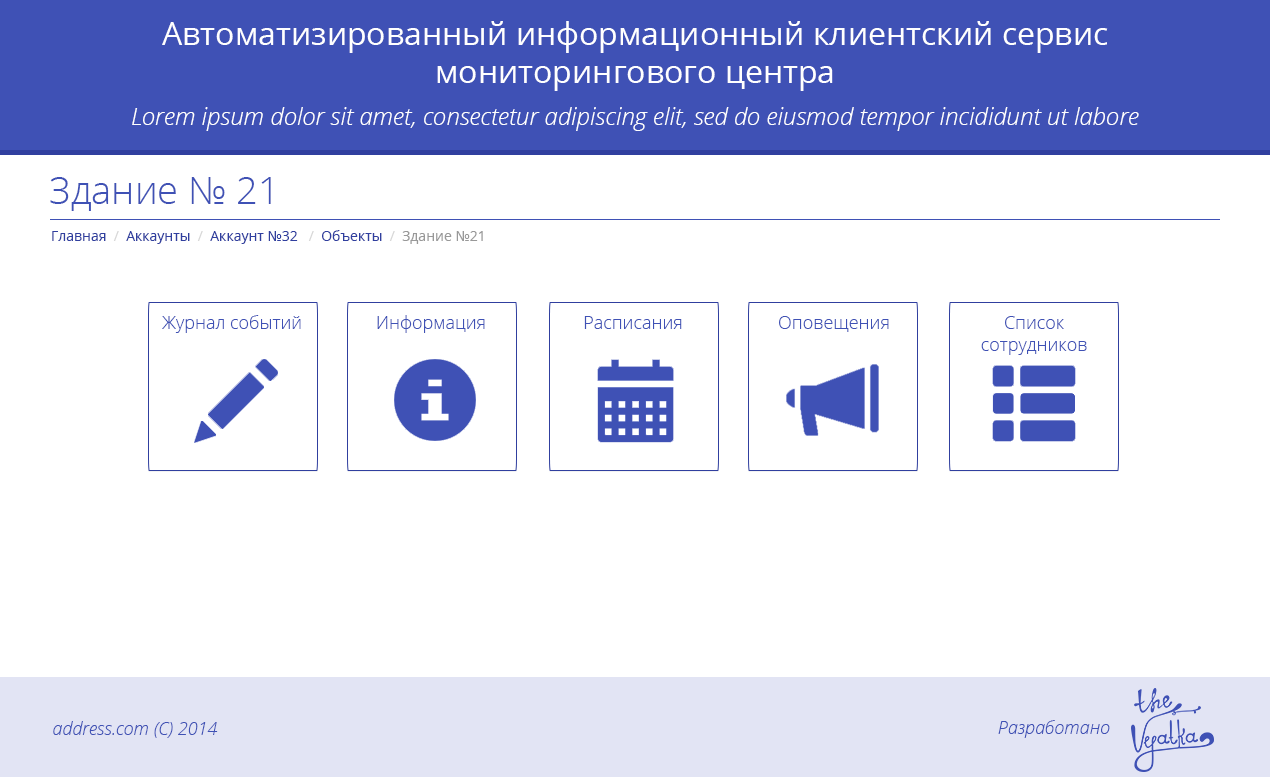
<style>
.page{position:relative;width:1270px;height:777px;background:#ffffff}
.page>*{position:absolute;margin:0}
.t1{font:32px "OpenSans";color:#ffffff}
.t2{font:24px "OpenSansLight-Italic";color:#ffffff}
.t3{font:38px "OpenSans-Light";color:#3f51b5}
.t4{font:14px "OpenSans";color:#303f9f}
.t5{font:14px "OpenSans";color:#d8d8d8}
.t6{font:14px "OpenSans";color:#999999}
.t7{font:18px "OpenSans-Light";color:#3f51b5}
.t8{font:18px "OpenSansLight-Italic";color:#3f51b5}
</style>
<div class="page">
<p class="t1" style="left:162px;top:21px;width:946px;height:70px;text-align:center">Автоматизированный информационный клиентский сервис<br>мониторингового центра</p>
<p class="t2" style="left:132px;top:107px;width:1007px;height:24px">Lorem ipsum dolor sit amet, consectetur adipiscing elit, sed do eiusmod tempor incididunt ut labore</p>
<p class="t3" style="left:50px;top:177px;width:221px;height:34px">Здание № 21</p>
<p class="t4" style="left:52px;top:230px;width:431px;height:14px">Главная  <span class="t5">/  </span>Аккаунты  <span class="t5">/  </span>Аккаунт №32   <span class="t5">/  </span>Объекты  <span class="t5">/</span><span class="t6">  Здание №21</span></p>
<p class="t7" style="left:162px;top:315px;width:139px;height:18px">Журнал событий</p>
<p class="t7" style="left:377px;top:315px;width:108px;height:18px">Информация</p>
<p class="t7" style="left:584px;top:316px;width:98px;height:13px">Расписания</p>
<p class="t7" style="left:779px;top:316px;width:110px;height:16px">Оповещения</p>
<p class="t7" style="left:981px;top:316px;width:106px;height:39px;text-align:center">Список сотрудников</p>
<p class="t8" style="left:53px;top:721px;width:165px;height:17px">address.com (C) 2014</p>
<p class="t8" style="left:998px;top:720px;width:112px;height:18px">Разработано</p>
</div>
